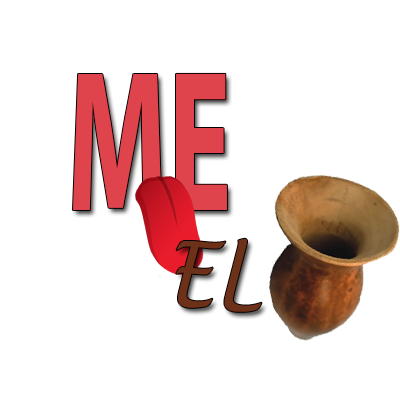
<style>
.page{position:relative;width:400px;height:400px;background:#ffffff}
.page>*{position:absolute;margin:0}
.t1{font:201.5px "MyriadPro-Bold";color:#df444c;scale:0.59 1}
.t2{font:90.3px "LucidaHandwriting-Italic";color:#6c3118;scale:0.84 1}
</style>
<div class="page">
<p class="t1" style="left:73px;top:73px;width:154px;height:137px">ME</p>
<p class="t2" style="left:176px;top:238px;width:86px;height:74px;rotate:5deg">EL</p>
</div>
